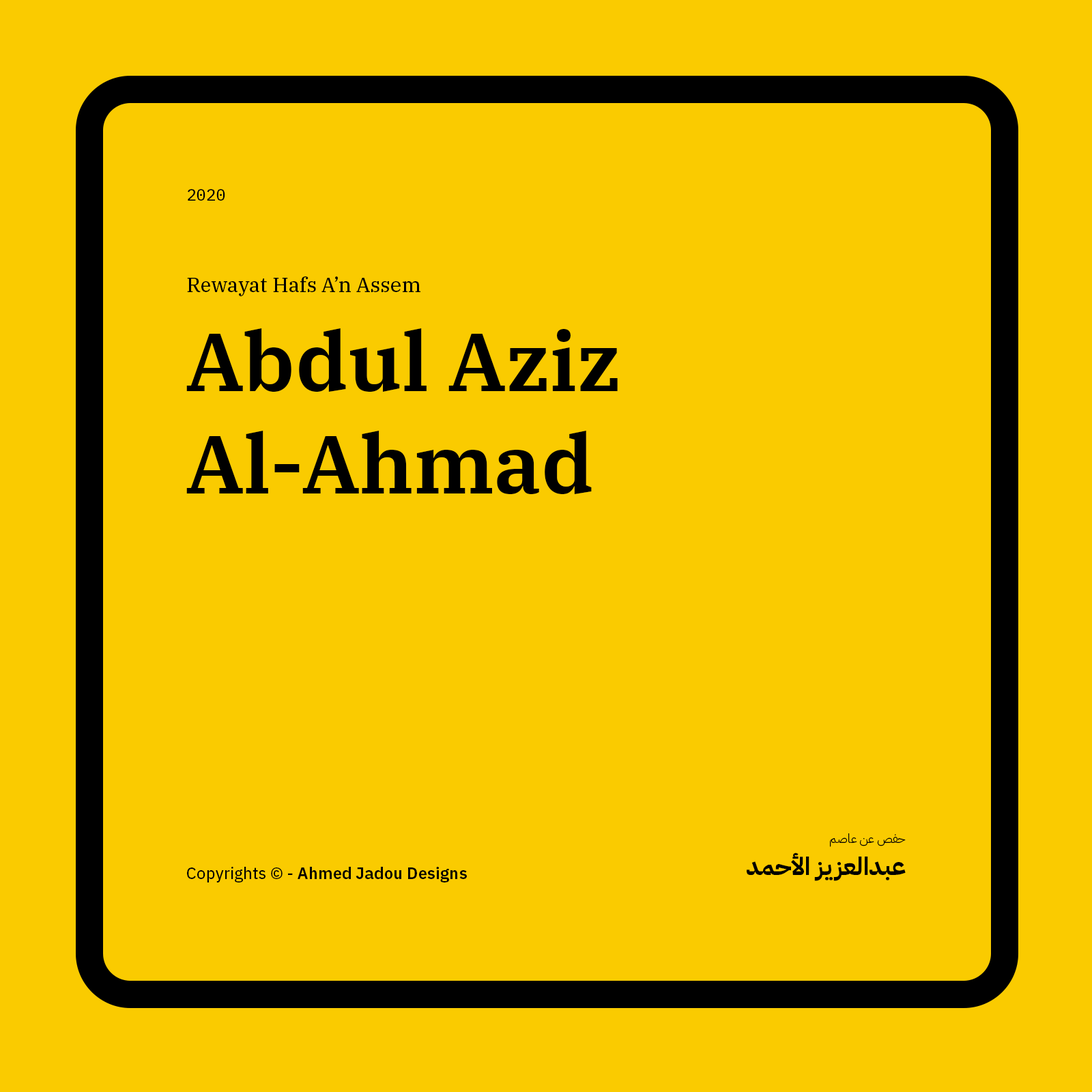
<style>
.page{position:relative;width:1092px;height:1092px;background:#facb00}
.page>*{position:absolute;margin:0}
.t1{font:16.4px "IBMPlexMono-Text";color:#000000}
.t2{font:20.5px "IBMPlexSerif-Text";color:#000000}
.t3{font:81.9px/102.7px "IBMPlexSerif-SemiBold";color:#000000}
.t4{font:12.3px "IBMPlexArabic-Light";color:#000000}
.t5{font:24.6px "IBMPlexArabic-Bold";color:#000000}
.t6{font:16.4px "IBMPlexSans-SemiBold";color:#000000}
.t7{font:16.4px "IBMPlexSans-Text";color:#000000}
</style>
<div class="page">
<p class="t1" style="left:188px;top:189px;width:37px;height:12px">2020</p>
<p class="t2" style="left:187px;top:276px;width:233px;height:20px">Rewayat Hafs A’n Assem</p>
<p class="t3" style="left:186px;top:328px;width:432px;height:166px">Abdul Aziz Al-Ahmad</p>
<p class="t4" style="left:830px;top:833px;width:76px;height:14px">حفص عن عاصم</p>
<p class="t5" style="left:747px;top:852px;width:159px;height:29px">عبدالعزيز الأحمد</p>
<p class="t6" style="left:187px;top:867px;width:280px;height:15px"><span class="t7">Copyrights © - </span>Ahmed Jadou Designs</p>
</div>
